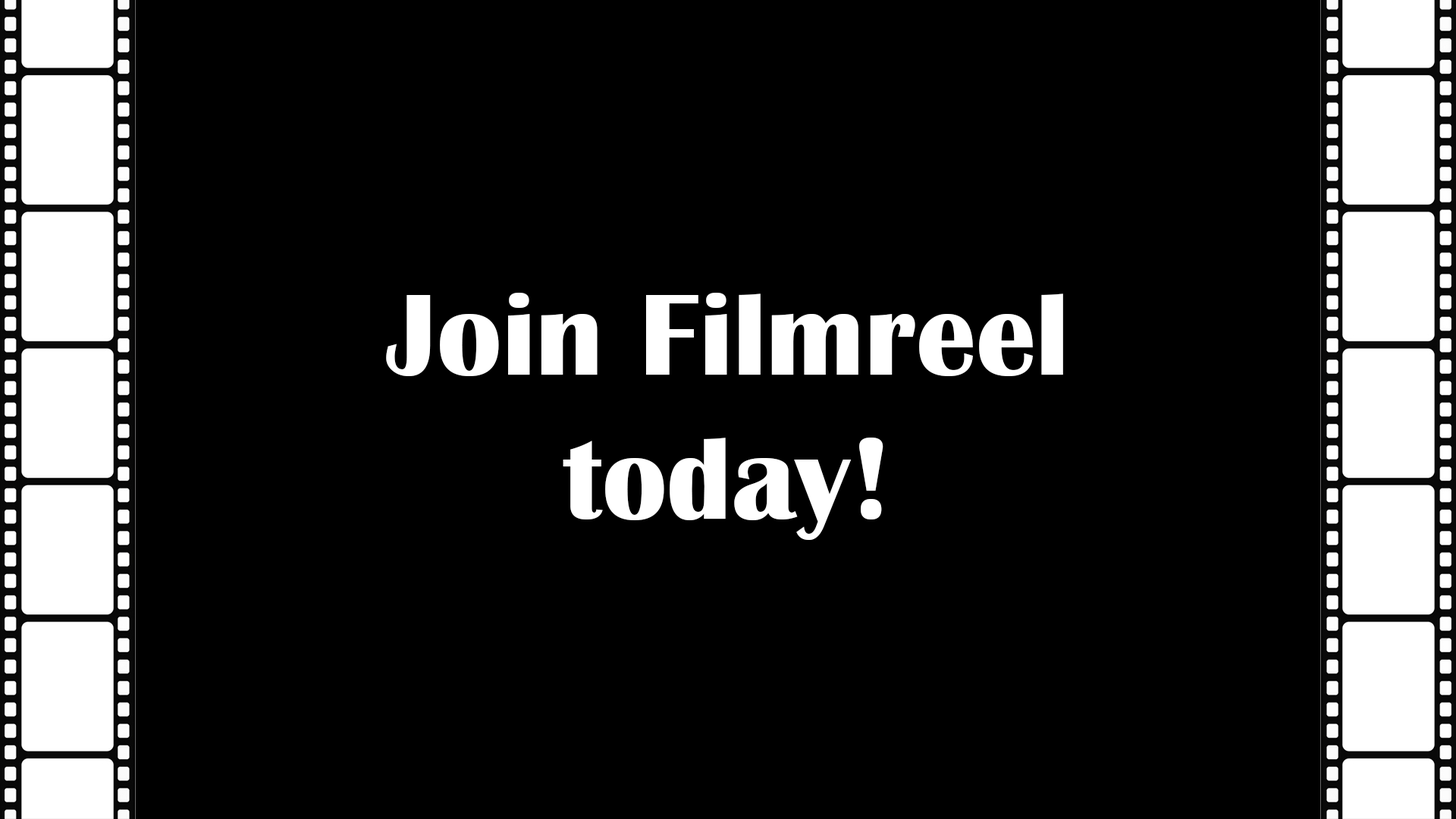
<style>
.page{position:relative;width:1456px;height:819px;background:#000000}
.page>*{position:absolute;margin:0}
.t1{font:120.1px "BritannicBold";color:#ffffff}
</style>
<div class="page">
<p class="t1" style="left:386px;top:293px;width:677px;height:247px;text-align:center">Join Filmreel today!</p>
</div>
